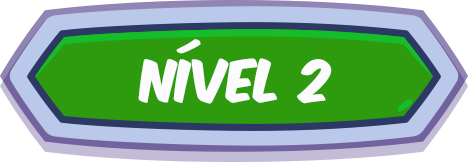
<style>
.page{position:relative;width:469px;height:162px;background:#2e9a0e}
.page>*{position:absolute;margin:0}
.t1{font:50px "KomikaAxis";color:#fcfbfd}
</style>
<div class="page">
<p class="t1" style="left:138px;top:39px;width:194px;height:65px">Nível 2</p>
</div>
